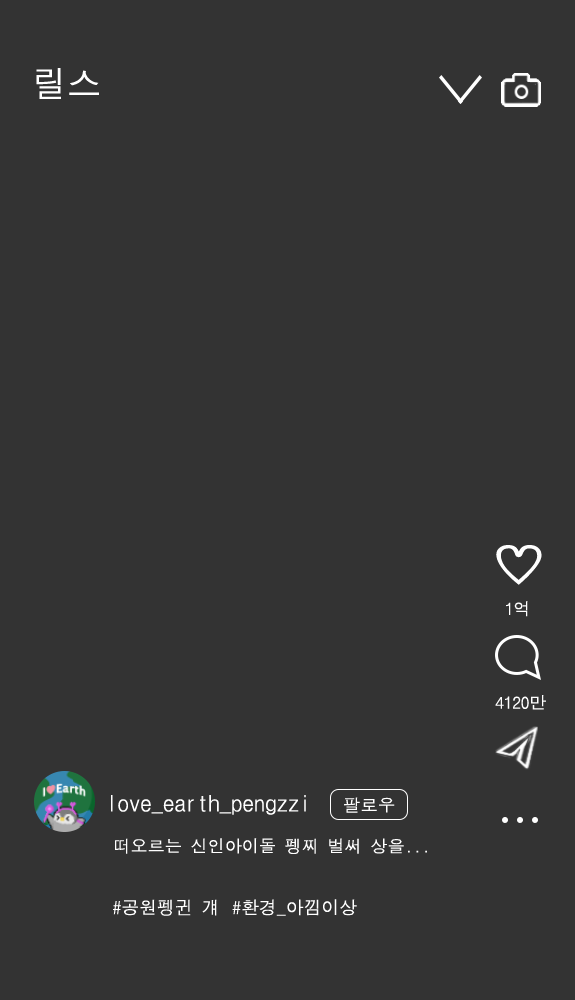
<style>
.page{position:relative;width:575px;height:1000px;background:#333333}
.page>*{position:absolute;margin:0}
.t1{font:35.5px "DotumChe";color:#ffffff}
.t2{font:45.9px "DotumChe";color:#ffffff;scale:1.25 1}
.t3{font:17px "DotumChe";color:#ffffff}
.t4{font:22.7px "DotumChe";color:#ffffff}
.t5{font:17.4px "DotumChe";color:#ffffff}
.t6{font:17.1px "DotumChe";color:#ffffff}
.t7{font:17.9px "DotumChe";color:#ffffff}
</style>
<div class="page">
<p class="t1" style="left:36px;top:68px;width:63px;height:31px">릴스</p>
<p class="t2" style="left:496px;top:545px;width:46px;height:40px">♡</p>
<p class="t3" style="left:506px;top:601px;width:22px;height:16px">1억</p>
<p class="t3" style="left:495px;top:695px;width:51px;height:15px">4120만</p>
<p class="t4" style="left:111px;top:795px;width:195px;height:20px">love_earth_pengzzi</p>
<p class="t5" style="left:344px;top:797px;width:51px;height:16px">팔로우</p>
<p class="t6" style="left:115px;top:838px;width:312px;height:16px">떠오르는 신인아이돌 펭찌 벌써 상을...</p>
<p class="t7" style="left:113px;top:899px;width:104px;height:17px">#공원펭귄 걔</p>
<p class="t7" style="left:232px;top:899px;width:125px;height:17px">#환경_아낌이상</p>
</div>
